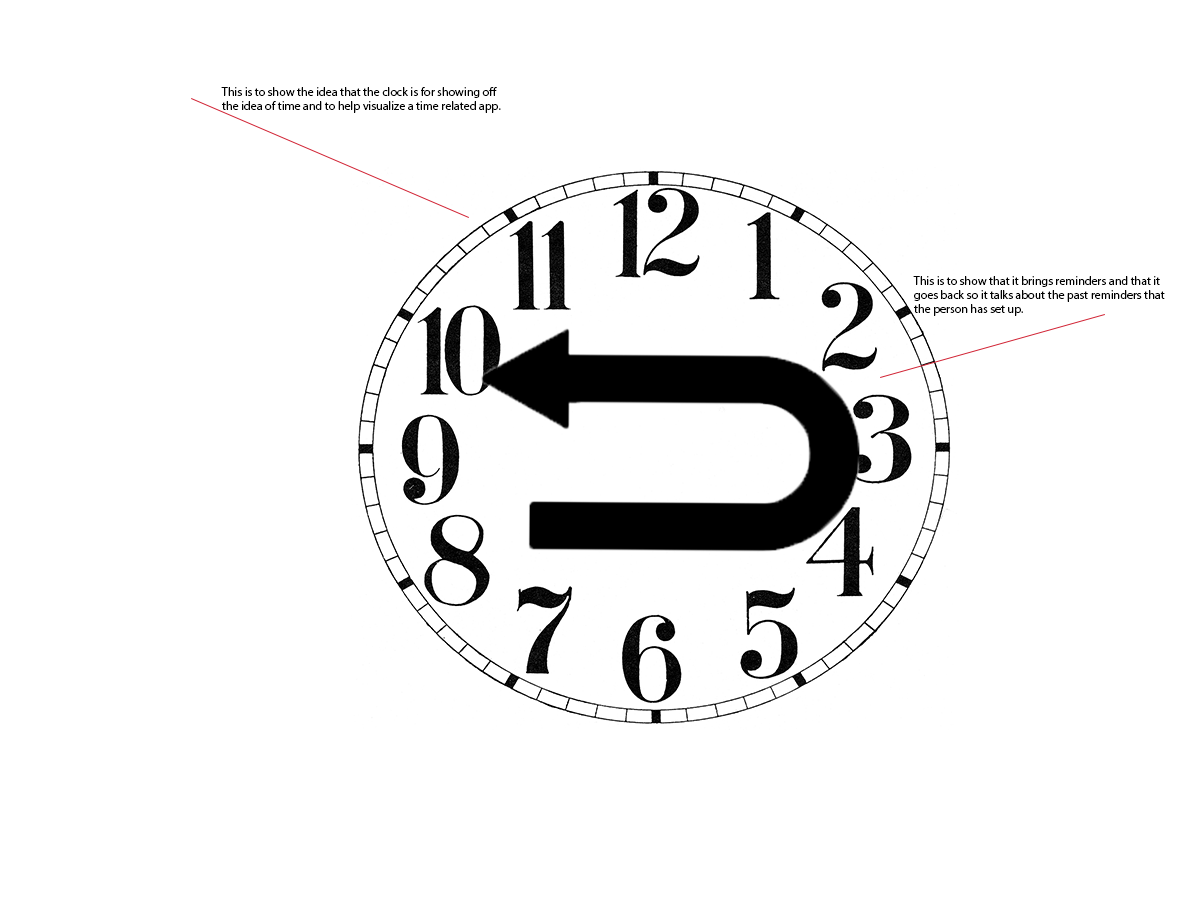
<style>
.page{position:relative;width:1200px;height:897px;background:#ffffff}
.page>*{position:absolute;margin:0}
.t1{font:12px "MyriadPro-Regular";color:#000000}
</style>
<div class="page">
<p class="t1" style="left:221px;top:87px;width:280px;height:26px">This is to show the idea that the clock is for showing off the idea of time and to help visualize a time related app.</p>
<p class="t1" style="left:913px;top:276px;width:252px;height:40px">This is to show that it brings reminders and that it goes back so it talks about the past reminders that the person has set up.</p>
</div>
